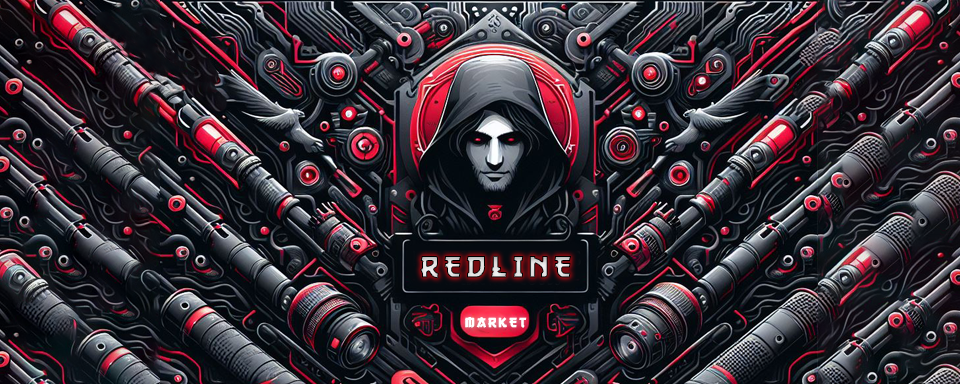
<style>
.page{position:relative;width:960px;height:384px}
.page>*{position:absolute;margin:0}
.t1{font:31.7px "GangofThreeRUSbyDaymarius";letter-spacing:0.15em;text-transform:uppercase;font-weight:bold}
.t2{font:14.1px "GangofThreeRUSbyDaymarius";letter-spacing:0.15em;color:#ffffff;text-transform:uppercase;font-weight:bold}
</style>
<div class="page">
<p class="t1" style="left:420px;top:255px;width:151px;height:24px">RedLine</p>
<p class="t2" style="left:465px;top:317px;width:62px;height:11px">Market</p>
</div>
